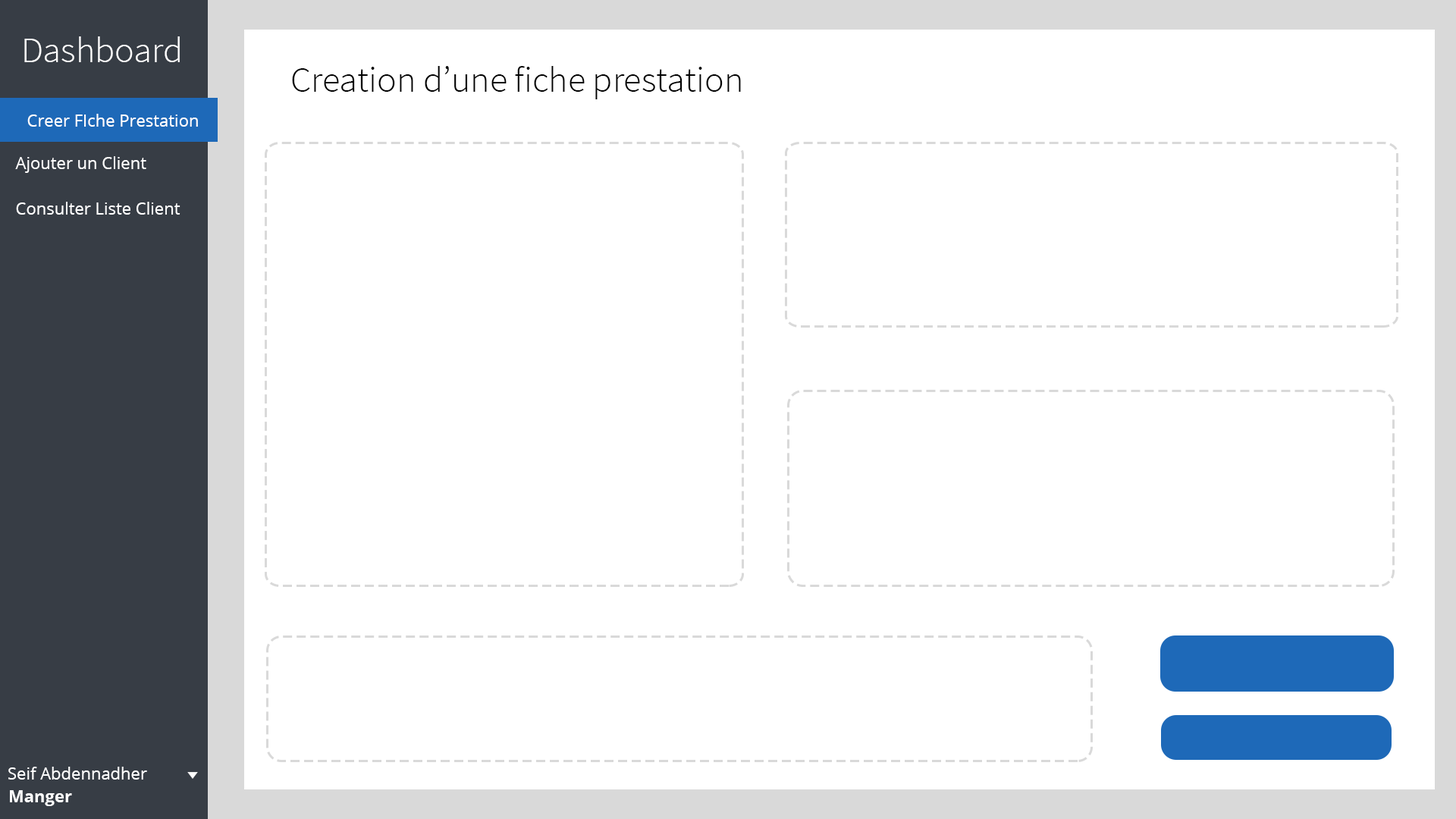
<style>
.page{position:relative;width:1456px;height:819px;background:#ffffff}
.page>*{position:absolute;margin:0}
.t1{font:36.4px "SourceSansPro-Light";color:#ffffff}
.t2{font:36.4px "SourceSansPro-Light";color:#000000}
.t3{font:16.7px "OpenSans";color:#ffffff}
.t4{font:16.7px "OpenSans-Bold";color:#ffffff}
</style>
<div class="page">
<p class="t1" style="left:24px;top:36px;width:156px;height:26px">Dashboard</p>
<p class="t2" style="left:292px;top:66px;width:449px;height:33px">Creation d’une fiche prestation</p>
<p class="t3" style="left:27px;top:114px;width:171px;height:13px">Creer FIche Prestation</p>
<p class="t3" style="left:15px;top:156px;width:131px;height:17px">Ajouter un Client</p>
<p class="t3" style="left:16px;top:202px;width:164px;height:13px">Consulter Liste Client</p>
<p class="t3" style="left:8px;top:767px;width:139px;height:13px">Seif Abdennadher</p>
<p class="t4" style="left:10px;top:790px;width:62px;height:16px">Manger</p>
</div>
